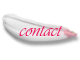
<style>
.page{position:relative;width:80px;height:60px;background:#ffffff}
.page>*{position:absolute;margin:0}
.t1{font:19.8px "Vivaldii";color:#ed135a}
</style>
<div class="page">
<p class="t1" style="left:19px;top:26px;width:44px;height:10px">contact</p>
</div>
